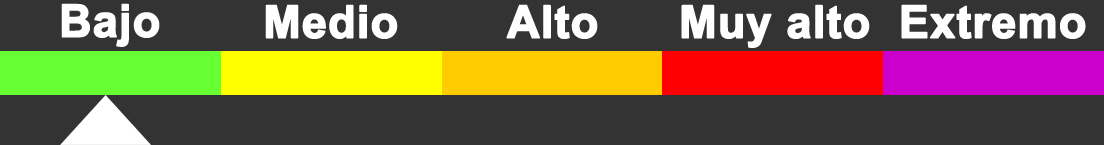
<style>
.page{position:relative;width:1104px;height:145px;background:#333333}
.page>*{position:absolute;margin:0}
.t1{font:45px "Arial-BoldMT";color:#ffffff;font-weight:bold}
</style>
<div class="page">
<p class="t1" style="left:61px;top:3px;width:99px;height:44px">Bajo</p>
<p class="t1" style="left:265px;top:4px;width:133px;height:35px">Medio</p>
<p class="t1" style="left:506px;top:4px;width:92px;height:35px">Alto</p>
<p class="t1" style="left:681px;top:4px;width:189px;height:44px">Muy alto</p>
<p class="t1" style="left:901px;top:4px;width:185px;height:35px">Extremo</p>
</div>
